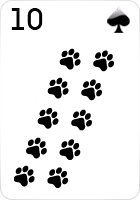
<style>
.page{position:relative;width:140px;height:200px;background:#ffffff}
.page>*{position:absolute;margin:0}
.t1{font:26px "CardCharacters";color:#010101}
</style>
<div class="page">
<p class="t1" style="left:11px;top:8px;width:32px;height:22px">10</p>
</div>
